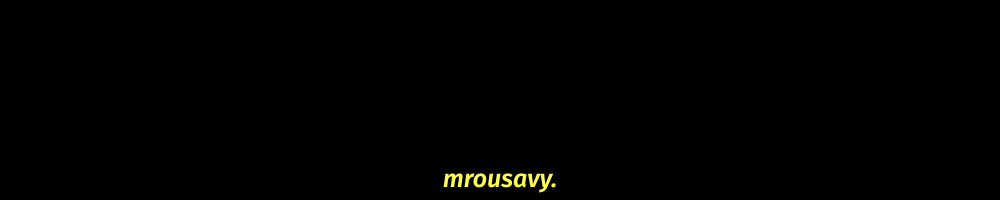
<style>
.page{position:relative;width:1000px;height:200px;background:#000000}
.page>*{position:absolute;margin:0}
.t1{font:25px "FiraSans-SemiBoldItalic";color:#fcfc53}
</style>
<div class="page">
<p class="t1" style="left:443px;top:173px;width:113px;height:20px">mrousavy.</p>
</div>
